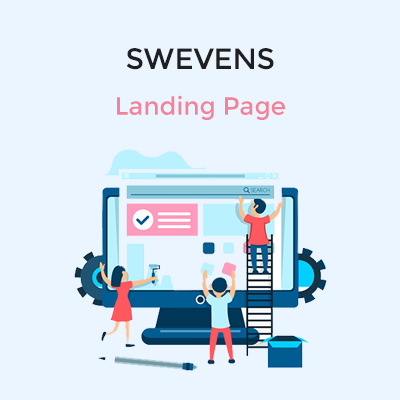
<style>
.page{position:relative;width:400px;height:400px;background:#ebf5ff}
.page>*{position:absolute;margin:0}
.t1{font:25px/45.8px "Montserrat-Regular";color:#f38198}
.t2{font:29.2px/45.8px "Montserrat-Regular";color:#1f1f1f}
</style>
<div class="page">
<p class="t1" style="left:117px;top:48px;width:168px;height:72px;text-align:center"><span class="t2">SWEVENS<br></span>Landing Page</p>
</div>
